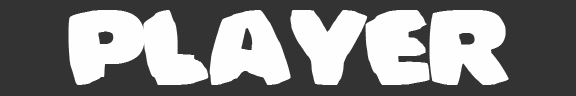
<style>
.page{position:relative;width:576px;height:96px;background:#333333}
.page>*{position:absolute;margin:0}
.t1{font:100px "Bomberman";color:#fefefe}
</style>
<div class="page">
<p class="t1" style="left:68px;top:10px;width:441px;height:75px">Player</p>
</div>
